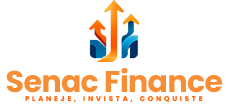
<style>
.page{position:relative;width:228px;height:104px;background:#ffffff}
.page>*{position:absolute;margin:0}
.t1{font:30px "Poppins-Bold";letter-spacing:-0.02em;color:#f78d35}
.t2{font:6.8px "Poppins-Bold";letter-spacing:0.42em;color:#fe5e01;text-transform:uppercase}
</style>
<div class="page">
<p class="t1" style="left:6px;top:68px;width:217px;height:25px">Senac Finance</p>
<p class="t2" style="left:25px;top:96px;width:178px;height:7px">Planeje, invista, conquiste</p>
</div>
